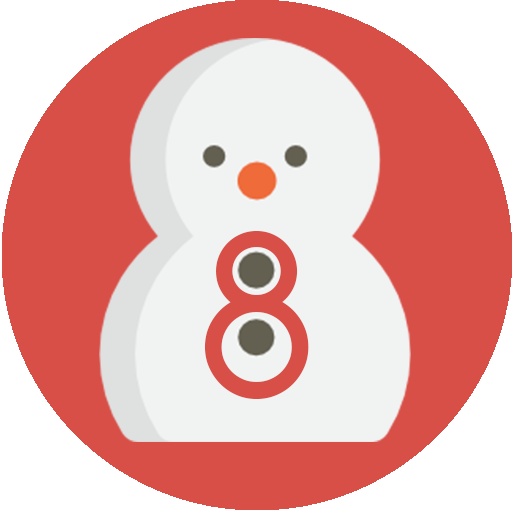
<style>
.page{position:relative;width:512px;height:512px;background:#d84f48}
.page>*{position:absolute;margin:0}
.t1{font:263.1px "Antipasto";color:#d84f48}
</style>
<div class="page">
<p class="t1" style="left:204px;top:231px;width:105px;height:168px">8</p>
</div>
